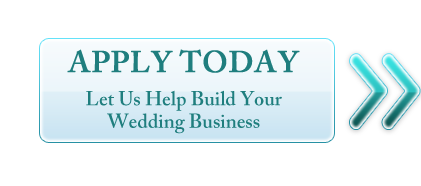
<style>
.page{position:relative;width:421px;height:186px;background:#ffffff}
.page>*{position:absolute;margin:0}
.t1{font:20px/22.6px "ACaslonPro-Semibold";color:#1f7e7e}
.t2{font:30px/50.6px "ACaslonPro-Semibold";color:#1f7e7e;text-transform:uppercase;font-weight:bold}
</style>
<div class="page">
<p class="t1" style="left:67px;top:49px;width:233px;height:85px;text-align:center"><span class="t2">Apply Today<br><br></span>Let Us Help Build Your<br>Wedding Business</p>
</div>
